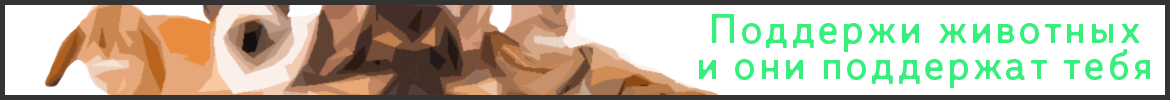
<style>
.page{position:relative;width:1170px;height:100px;background:#ffffff}
.page>*{position:absolute;margin:0}
.t1{font:44px/36px "LetoTextSansDefect";letter-spacing:0.05em;color:#38ef7d}
</style>
<div class="page">
<p class="t1" style="left:699px;top:14px;width:451px;height:74px;text-align:center">Поддержи животных<br>и они поддержат тебя</p>
</div>
